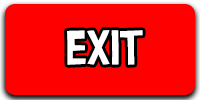
<style>
.page{position:relative;width:200px;height:100px;background:#ff0000}
.page>*{position:absolute;margin:0}
.t1{font:49px "InsideOut";color:#ffffff}
</style>
<div class="page">
<p class="t1" style="left:67px;top:30px;width:76px;height:35px">exit</p>
</div>
